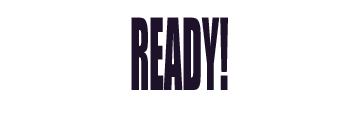
<style>
.page{position:relative;width:360px;height:120px;background:#ffffff}
.page>*{position:absolute;margin:0}
.t1{font:91.6px "Impact";color:#1e122a;scale:0.39 1}
</style>
<div class="page">
<p class="t1" style="left:131px;top:17px;width:97px;height:73px">READY!</p>
</div>
